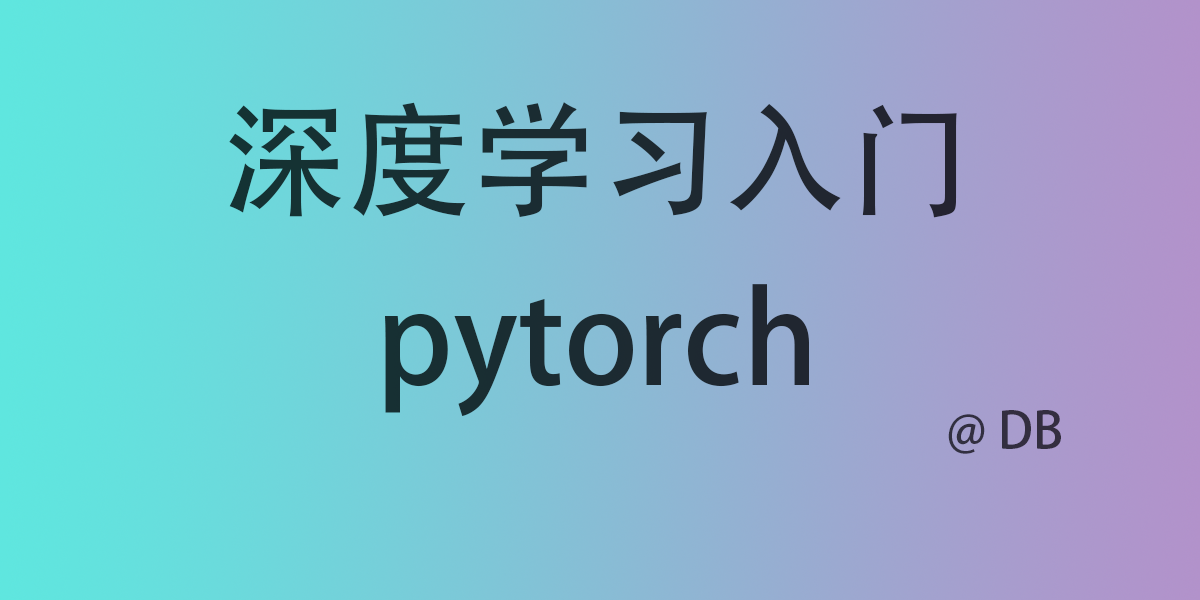
<style>
.page{position:relative;width:1200px;height:600px}
.page>*{position:absolute;margin:0}
.t1{font:125px/178.3px "AdobeHeitiStd-Regular";color:#1b2c32}
.t2{font:50px "AdobeHeitiStd-Regular";color:#332e40}
</style>
<div class="page">
<p class="t1" style="left:229px;top:102px;width:728px;height:315px;text-align:center">深度学习入门<br>pytorch</p>
<p class="t2" style="left:948px;top:410px;width:113px;height:44px">@ DB</p>
</div>
